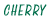
<style>
.page{position:relative;width:51px;height:20px;background:#ffffff}
.page>*{position:absolute;margin:0}
.t1{font:15px "TikiHoliday";letter-spacing:0.1em;color:#006d4a;font-weight:bold}
</style>
<div class="page">
<p class="t1" style="left:4px;top:4px;width:43px;height:12px">CHERRY</p>
</div>
